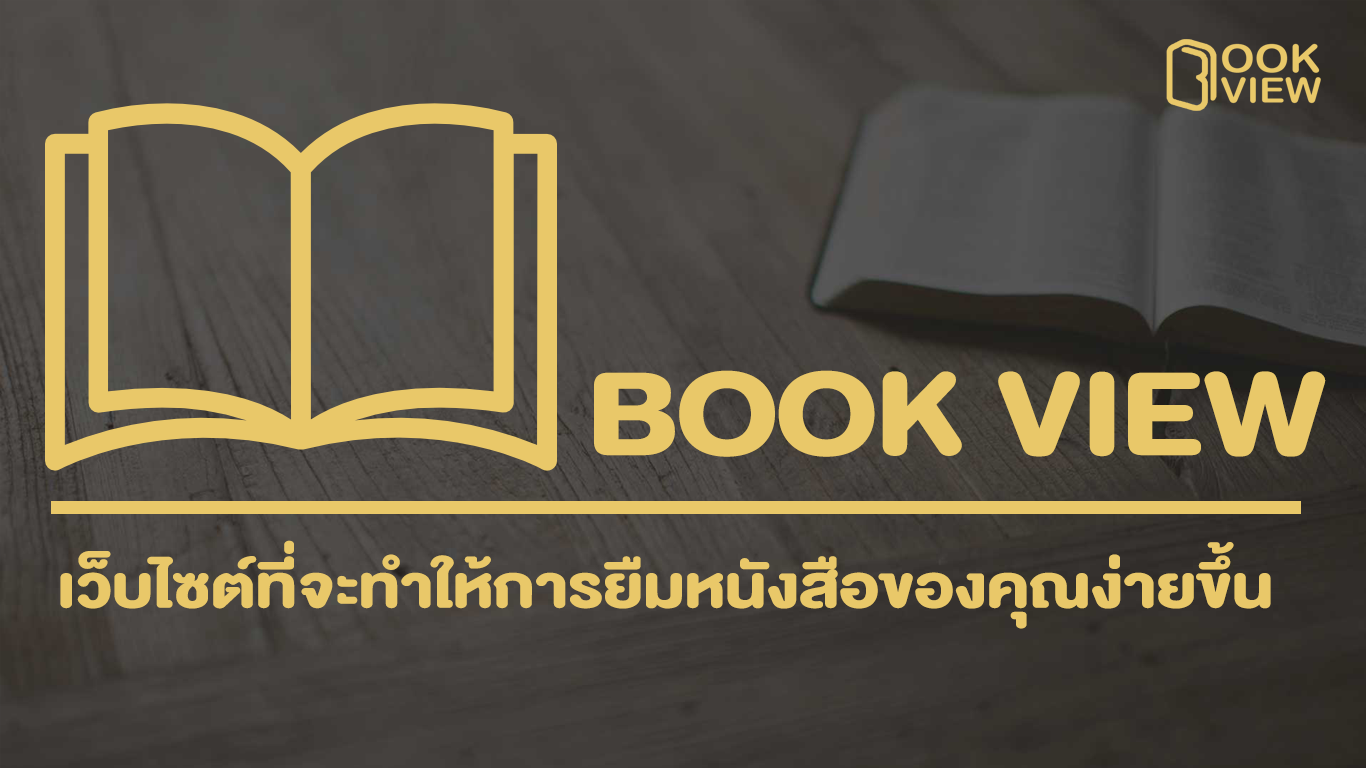
<style>
.page{position:relative;width:1366px;height:768px}
.page>*{position:absolute;margin:0}
.t1{font:168.9px "DBHelvethaicaMonX-85Blk";color:#e9c869;text-transform:uppercase;scale:1.12 1}
.t2{font:83.8px "DBHelvethaicaMonX-85Blk";color:#e9c869;text-transform:uppercase;scale:1.12 1}
</style>
<div class="page">
<p class="t1" style="left:594px;top:370px;width:732px;height:87px">Book View</p>
<p class="t2" style="left:60px;top:540px;width:1211px;height:89px">เว็บไซต์ที่จะทำให้การยืมหนังสือของคุณง่ายขึ้น</p>
</div>
